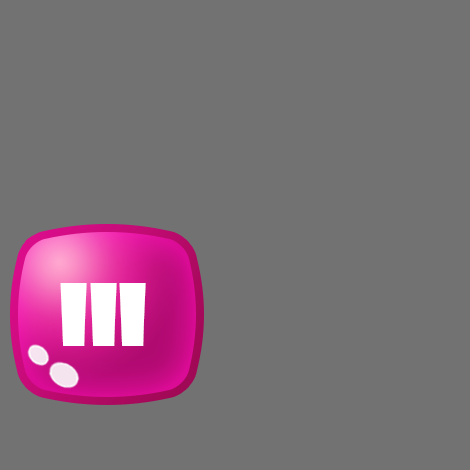
<style>
.page{position:relative;width:470px;height:470px;background:#727272}
.page>*{position:absolute;margin:0}
.t1{font:83.7px "ShowcardGothic-Reg";color:#ffffff;scale:0.92 1}
</style>
<div class="page">
<p class="t1" style="left:60px;top:283px;width:27px;height:63px">I</p>
<p class="t1" style="left:90px;top:283px;width:27px;height:63px">I</p>
<p class="t1" style="left:119px;top:283px;width:27px;height:63px">I</p>
</div>
